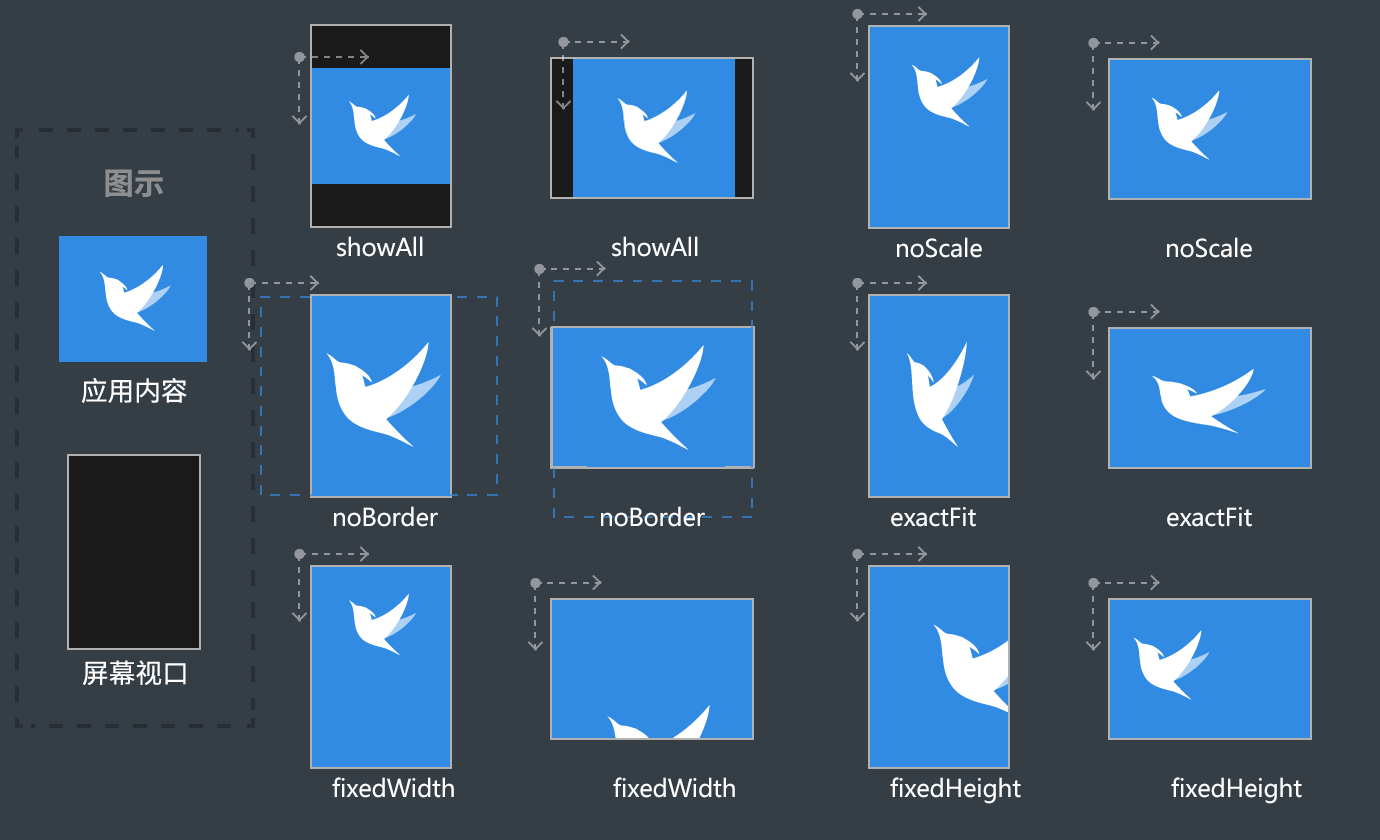
<style>
.page{position:relative;width:1380px;height:840px;background:#363e45}
.page>*{position:absolute;margin:0}
.t1{font:24px "MicrosoftYaHei";letter-spacing:-0.01em;color:#ffffff}
</style>
<div class="page">
<p class="t1" style="left:337px;top:236px;width:86px;height:21px">showAll</p>
<p class="t1" style="left:612px;top:236px;width:86px;height:21px">showAll</p>
<p class="t1" style="left:897px;top:237px;width:85px;height:21px">noScale</p>
<p class="t1" style="left:1167px;top:237px;width:85px;height:21px">noScale</p>
<p class="t1" style="left:334px;top:506px;width:104px;height:21px">noBorder</p>
<p class="t1" style="left:601px;top:506px;width:104px;height:21px">noBorder</p>
<p class="t1" style="left:891px;top:507px;width:85px;height:20px">exactFit</p>
<p class="t1" style="left:1167px;top:507px;width:85px;height:20px">exactFit</p>
<p class="t1" style="left:332px;top:777px;width:122px;height:21px">fixedWidth</p>
<p class="t1" style="left:613px;top:777px;width:122px;height:21px">fixedWidth</p>
<p class="t1" style="left:890px;top:777px;width:131px;height:27px">fixedHeight</p>
<p class="t1" style="left:1171px;top:777px;width:131px;height:27px">fixedHeight</p>
</div>
